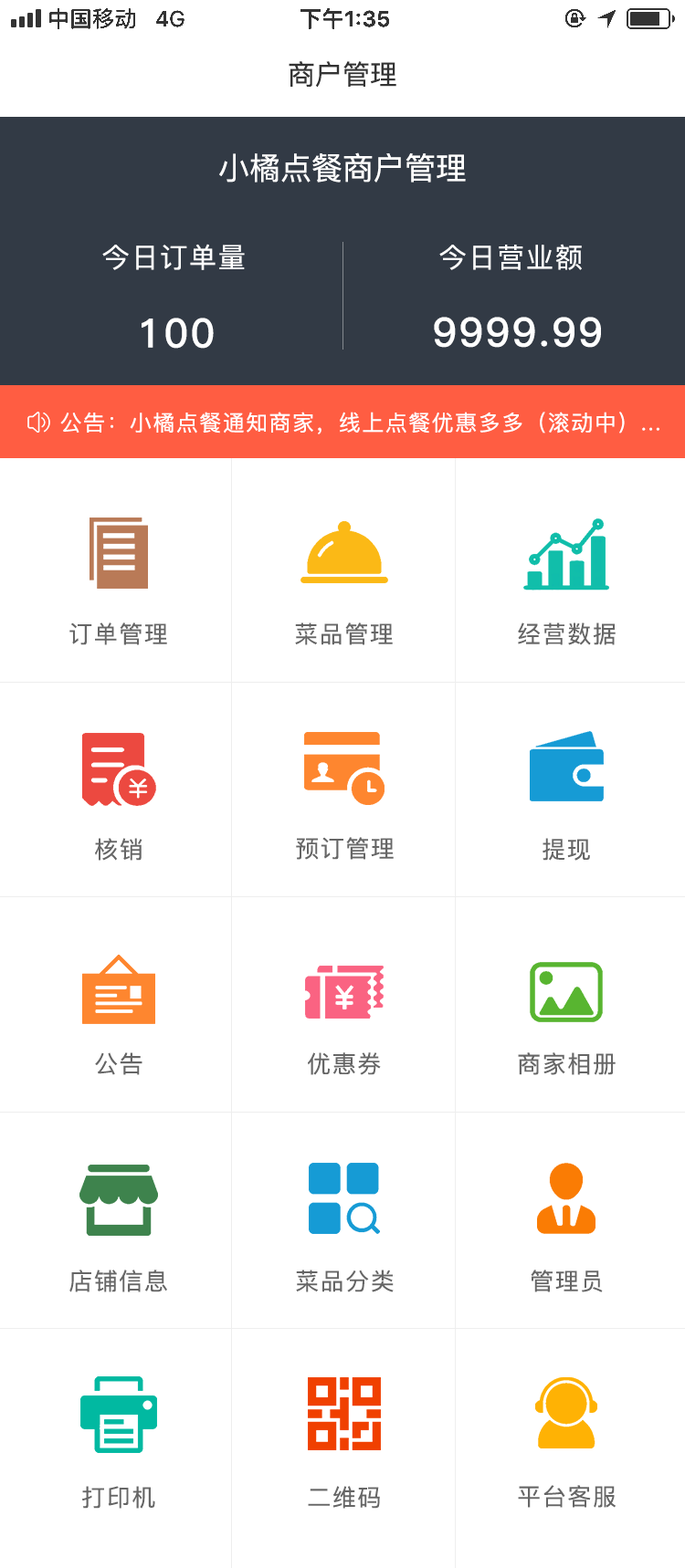
<style>
.page{position:relative;width:685px;height:1568px;background:#ffffff}
.page>*{position:absolute;margin:0}
.t1{font:27.4px "PingFang-SC-Medium";color:#333333}
.t2{font:31px "PingFang-SC-Medium";color:#ffffff}
.t3{font:27.4px "PingFang-SC-Medium";letter-spacing:0.06em;color:#ffffff}
.t4{font:40.2px "PingFang-SC-Bold";letter-spacing:0.06em;color:#ffffff}
.t5{font:21.9px "PingFang-SC-Medium";letter-spacing:0.06em;color:#ffffff}
.t6{font:23.7px "PingFang-SC-Medium";letter-spacing:0.06em;color:#666666}
</style>
<div class="page">
<p class="t1" style="left:288px;top:61px;width:108px;height:27px">商户管理</p>
<p class="t2" style="left:219px;top:152px;width:246px;height:31px">小橘点餐商户管理</p>
<p class="t3" style="left:102px;top:244px;width:143px;height:26px">今日订单量</p>
<p class="t3" style="left:439px;top:244px;width:142px;height:26px">今日营业额</p>
<p class="t4" style="left:141px;top:318px;width:73px;height:31px">100</p>
<p class="t4" style="left:434px;top:317px;width:167px;height:31px">9999.99</p>
<p class="t5" style="left:60px;top:412px;width:599px;height:22px">公告：小橘点餐通知商家，线上点餐优惠多多（滚动中）...</p>
<p class="t6" style="left:69px;top:622px;width:98px;height:23px">订单管理</p>
<p class="t6" style="left:295px;top:622px;width:97px;height:23px">菜品管理</p>
<p class="t6" style="left:517px;top:622px;width:98px;height:23px">经营数据</p>
<p class="t6" style="left:95px;top:838px;width:47px;height:23px">核销</p>
<p class="t6" style="left:296px;top:837px;width:97px;height:23px">预订管理</p>
<p class="t6" style="left:542px;top:838px;width:48px;height:23px">提现</p>
<p class="t6" style="left:95px;top:1052px;width:47px;height:23px">公告</p>
<p class="t6" style="left:308px;top:1052px;width:73px;height:23px">优惠券</p>
<p class="t6" style="left:517px;top:1052px;width:98px;height:23px">商家相册</p>
<p class="t6" style="left:69px;top:1270px;width:98px;height:22px">店铺信息</p>
<p class="t6" style="left:296px;top:1270px;width:97px;height:22px">菜品分类</p>
<p class="t6" style="left:530px;top:1270px;width:72px;height:22px">管理员</p>
<p class="t6" style="left:82px;top:1486px;width:73px;height:23px">打印机</p>
<p class="t6" style="left:308px;top:1486px;width:72px;height:23px">二维码</p>
<p class="t6" style="left:517px;top:1485px;width:98px;height:23px">平台客服</p>
</div>
